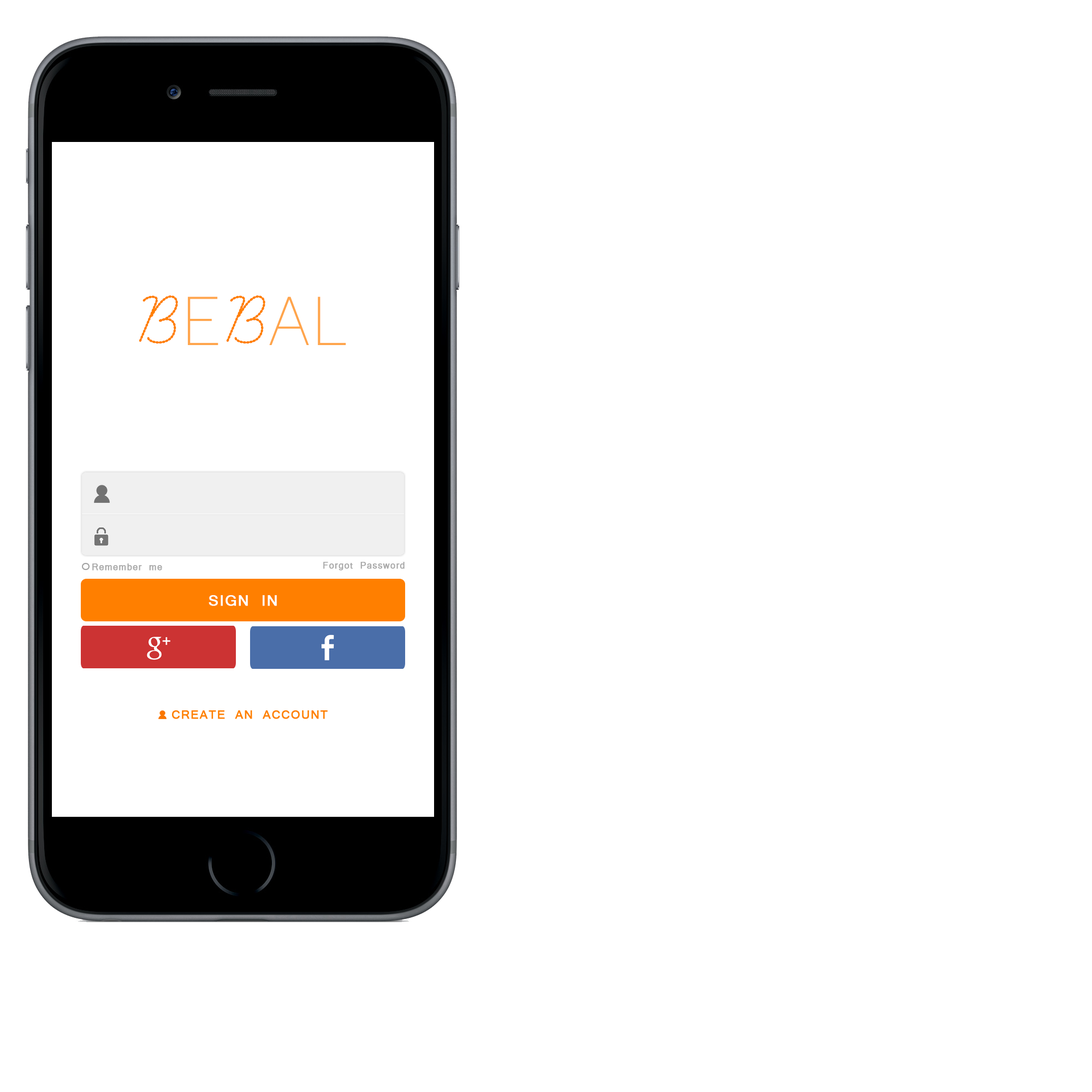
<style>
.page{position:relative;width:1092px;height:1092px;background:#ffffff}
.page>*{position:absolute;margin:0}
.t1{font:67.4px "Lane-Narrow";letter-spacing:0.06em;color:#ffa54b}
.t2{font:80.9px "LearningCurveDashedPro";letter-spacing:0.06em;color:#ff7f00;font-weight:bold}
.t3{font:9.8px "Vrinda";letter-spacing:0.06em;color:#a9a9a9;font-weight:bold}
.t4{font:16.4px "Vrinda";letter-spacing:0.06em;color:#ffffff;font-weight:bold}
</style>
<div class="page">
<p class="t1" style="left:139px;top:295px;width:207px;height:50px"><span class="t2">B</span>E<span class="t2">B</span>AL</p>
<p class="t3" style="left:92px;top:563px;width:70px;height:8px">Remember me</p>
<p class="t3" style="left:323px;top:562px;width:82px;height:9px">Forgot Password</p>
<p class="t4" style="left:209px;top:595px;width:68px;height:11px">SIGN IN</p>
</div>
